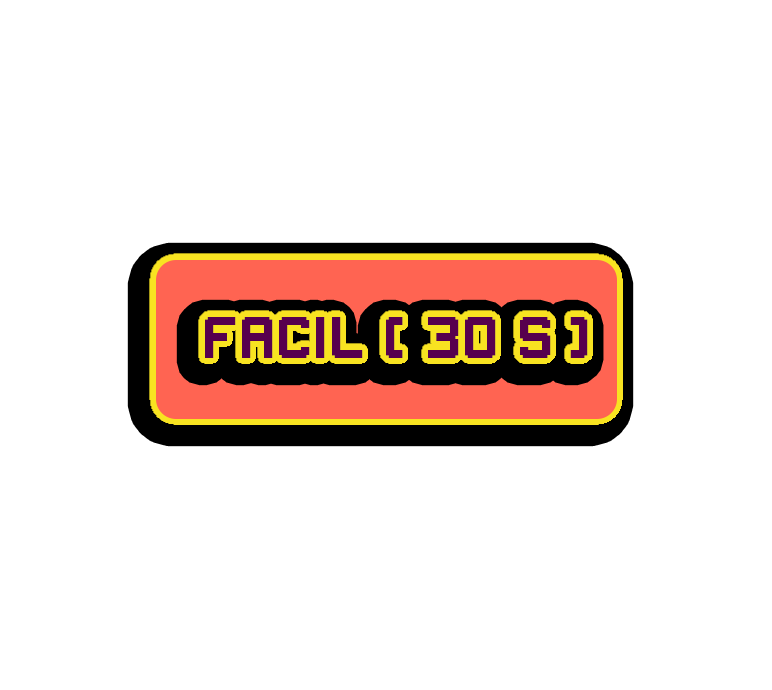
<style>
.page{position:relative;width:772px;height:690px;background:#ffffff}
.page>*{position:absolute;margin:0}
.t1{font:43.5px "Gameplay";letter-spacing:0.1em;color:#57004e}
</style>
<div class="page">
<p class="t1" style="left:205px;top:317px;width:383px;height:41px">FACIL ( 30 s)</p>
</div>
